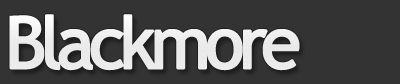
<style>
.page{position:relative;width:400px;height:84px;background:#333333}
.page>*{position:absolute;margin:0}
.t1{font:72px "TrebuchetMS";letter-spacing:-0.1em;color:#ffffff;font-weight:bold}
</style>
<div class="page">
<p class="t1" style="left:9px;top:14px;width:291px;height:57px">Blackmore</p>
</div>
